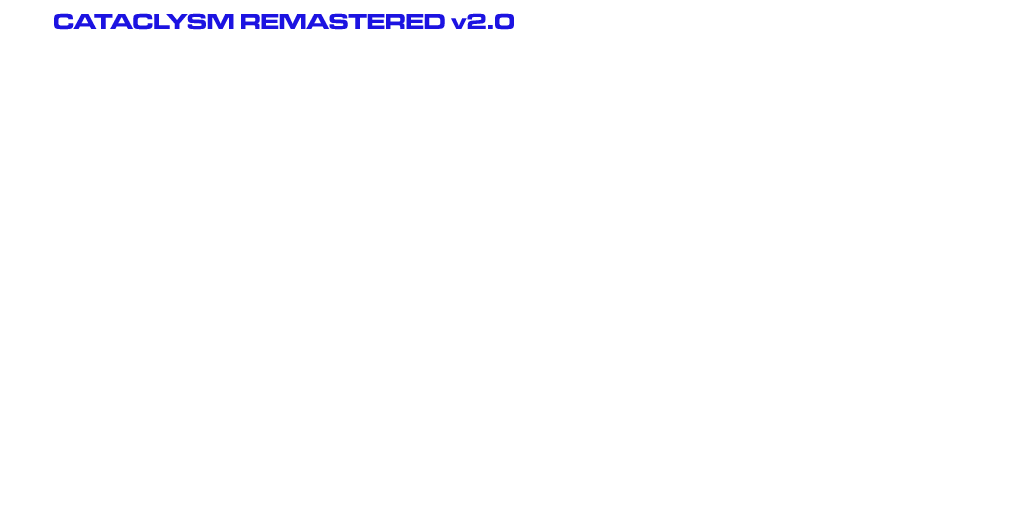
<style>
.page{position:relative;width:1024px;height:512px;background:#ffffff}
.page>*{position:absolute;margin:0}
.t1{font:22.7px "MicrogrammaDOT-BoldExtended";color:#1c13e1}
</style>
<div class="page">
<p class="t1" style="left:54px;top:13px;width:460px;height:17px">CATACLYSM REMASTERED v2.0</p>
</div>
